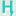
<style>
.page{position:relative;width:16px;height:16px;background:#e3e9e3}
.page>*{position:absolute;margin:0}
.t1{font:17.3px "Arial-BoldMT";color:#23ccbe}
</style>
<div class="page">
<p class="t1" style="left:2px;top:0px;width:12px;height:16px">Ӊ</p>
</div>
